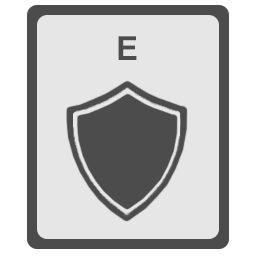
<style>
.page{position:relative;width:256px;height:256px;background:#e6e6e6}
.page>*{position:absolute;margin:0}
.t1{font:33.3px "Arial-BoldMT";color:#4c4c4c}
</style>
<div class="page">
<p class="t1" style="left:118px;top:36px;width:19px;height:24px">E</p>
</div>
